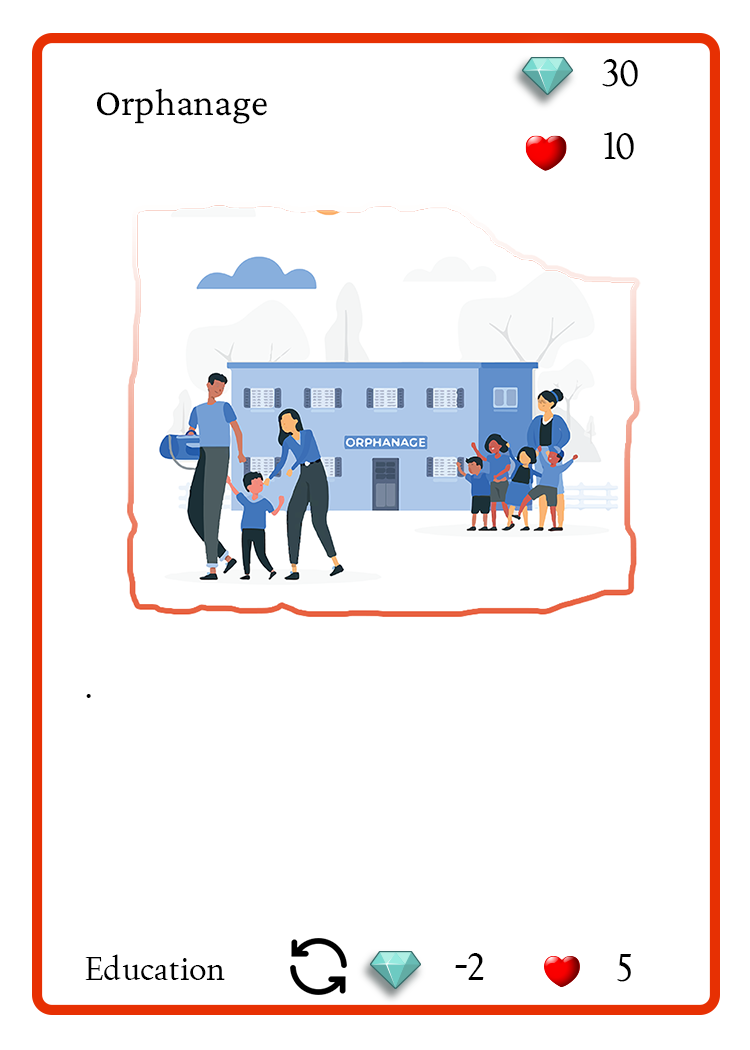
<style>
.page{position:relative;width:750px;height:1050px;background:#ffffff}
.page>*{position:absolute;margin:0}
.t1{font:37.5px "Joan-Regular";color:#000000;text-transform:uppercase}
.t2{font:38.9px "CrimsonPro-Regular";color:#000000}
.t3{font:33.3px "Joan-Regular";color:#000000}
</style>
<div class="page">
<p class="t1" style="left:602px;top:59px;width:36px;height:28px">30</p>
<p class="t2" style="left:97px;top:88px;width:170px;height:36px">Orphanage</p>
<p class="t1" style="left:604px;top:132px;width:30px;height:28px">10</p>
<p class="t3" style="left:86px;top:694px;width:5px;height:4px">.</p>
<p class="t1" style="left:455px;top:953px;width:29px;height:27px">-2</p>
<p class="t3" style="left:85px;top:954px;width:140px;height:26px">Education</p>
<p class="t1" style="left:617px;top:954px;width:14px;height:28px">5</p>
</div>
